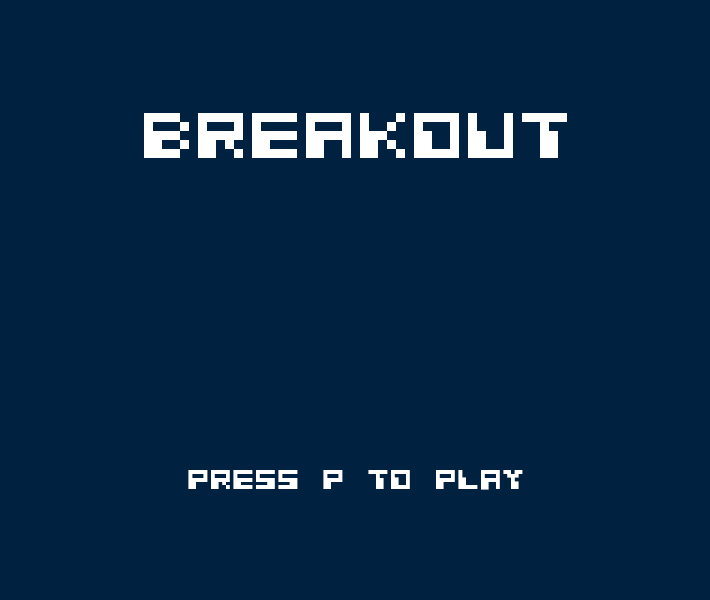
<style>
.page{position:relative;width:710px;height:600px;background:#002240}
.page>*{position:absolute;margin:0}
.t1{font:72px "CosmicAlien";color:#ffffff}
.t2{font:30px "CosmicAlien";color:#ffffff}
</style>
<div class="page">
<p class="t1" style="left:144px;top:113px;width:423px;height:45px">Breakout</p>
<p class="t2" style="left:188px;top:470px;width:335px;height:20px">Press P to Play</p>
</div>
